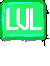
<style>
.page{position:relative;width:50px;height:66px;background:#ffffff}
.page>*{position:absolute;margin:0}
.t1{font:28.8px "ChemicalReactionABRK";color:#ffffff;scale:0.79 1}
</style>
<div class="page">
<p class="t1" style="left:6px;top:8px;width:37px;height:22px">LVL</p>
</div>
